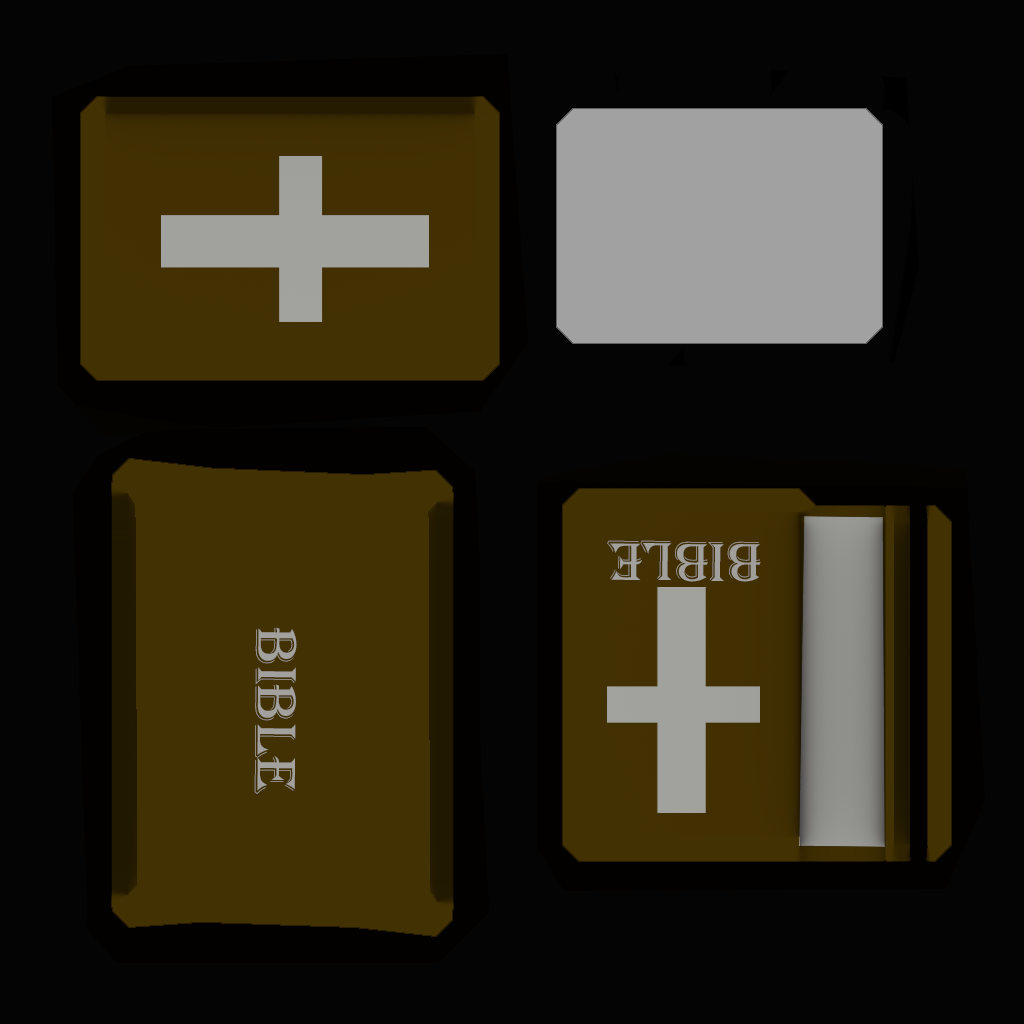
<style>
.page{position:relative;width:1024px;height:1024px;background:#050404}
.page>*{position:absolute;margin:0}
.t1{font:58.5px "Algerian";color:#a1a09c;scale:0.95 1}
.t2{font:60px "Algerian";color:#a2a19d}
</style>
<div class="page">
<p class="t1" style="left:607px;top:540px;width:154px;height:42px;rotate:-180deg">Bible</p>
<p class="t2" style="left:254px;top:627px;width:43px;height:167px;rotate:90deg">Bible</p>
</div>
